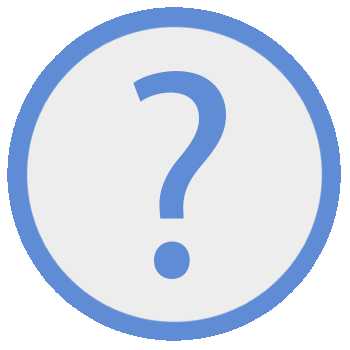
<style>
.page{position:relative;width:350px;height:350px;background:#ededed}
.page>*{position:absolute;margin:0}
.t1{font:300px "MyriadPro-Regular";color:#608bd5}
</style>
<div class="page">
<p class="t1" style="left:133px;top:71px;width:93px;height:208px">?</p>
</div>
